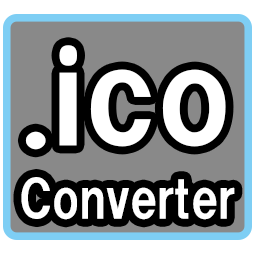
<style>
.page{position:relative;width:256px;height:256px;background:#898989}
.page>*{position:absolute;margin:0}
.t1{font:123.9px "HGPSoeiKakugothicUB";color:#ffffff;scale:1.12 1}
.t2{font:51px "HGPSoeiKakugothicUB";color:#ffffff}
</style>
<div class="page">
<p class="t1" style="left:25px;top:45px;width:201px;height:105px">.ico</p>
<p class="t2" style="left:21px;top:177px;width:214px;height:43px">Converter</p>
</div>
